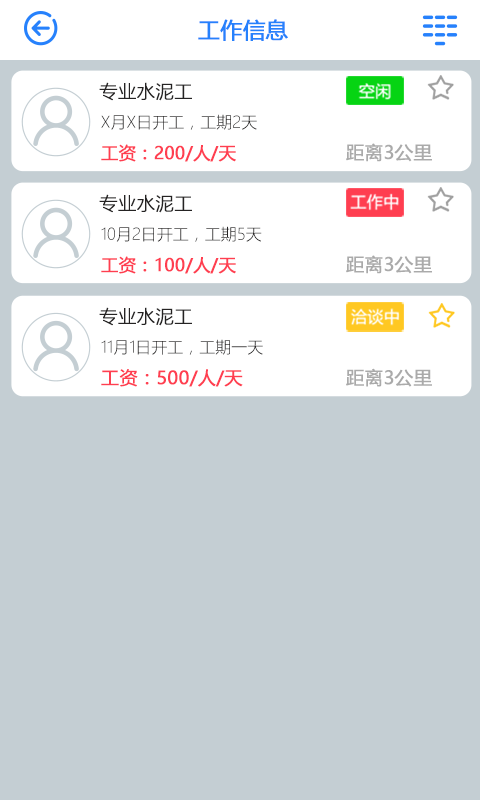
<style>
.page{position:relative;width:480px;height:800px;background:#c4ced3}
.page>*{position:absolute;margin:0}
.t1{font:22px "MicrosoftYaHei";color:#2681fc;font-weight:bold}
.t2{font:18.3px "MicrosoftYaHeiLight";color:#252323;font-weight:bold}
.t3{font:16px "MicrosoftYaHeiLight";color:#252323}
.t4{font:17.1px "MicrosoftYaHei";color:#ff3e50;font-weight:bold}
.t5{font:18.3px "MicrosoftYaHei";color:#aaaaaa;font-weight:bold}
.t6{font:18px "MicrosoftYaHei";color:#ff3e50;font-weight:bold}
</style>
<div class="page">
<p class="t1" style="left:198px;top:19px;width:90px;height:22px">工作信息</p>
<p class="t2" style="left:99px;top:82px;width:93px;height:19px">专业水泥工</p>
<p class="t3" style="left:101px;top:114px;width:156px;height:16px">X月X日开工，工期2天</p>
<p class="t4" style="left:101px;top:144px;width:135px;height:18px">工资：200/人/天</p>
<p class="t5" style="left:346px;top:143px;width:86px;height:19px">距离3公里</p>
<p class="t2" style="left:99px;top:194px;width:93px;height:19px">专业水泥工</p>
<p class="t3" style="left:101px;top:226px;width:161px;height:16px">10月2日开工，工期5天</p>
<p class="t4" style="left:101px;top:256px;width:135px;height:18px">工资：100/人/天</p>
<p class="t5" style="left:346px;top:255px;width:86px;height:19px">距离3公里</p>
<p class="t2" style="left:99px;top:307px;width:93px;height:19px">专业水泥工</p>
<p class="t3" style="left:101px;top:339px;width:162px;height:16px">11月1日开工，工期一天</p>
<p class="t6" style="left:101px;top:369px;width:142px;height:18px">工资：500/人/天</p>
<p class="t5" style="left:346px;top:368px;width:86px;height:19px">距离3公里</p>
</div>
